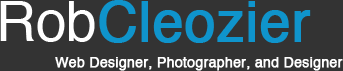
<style>
.page{position:relative;width:343px;height:71px;background:#333333}
.page>*{position:absolute;margin:0}
.t1{font:55px "Helvetica";color:#0f94cc;font-weight:bold}
.t2{font:55px "Helvetica";color:#ffffff}
.t3{font:14px "Helvetica";color:#ffffff;font-weight:bold}
</style>
<div class="page">
<p class="t1" style="left:0px;top:0px;width:311px;height:43px"><span class="t2">Rob</span>Cleozier</p>
<p class="t3" style="left:55px;top:57px;width:288px;height:14px">Web Designer, Photographer, and Designer</p>
</div>
